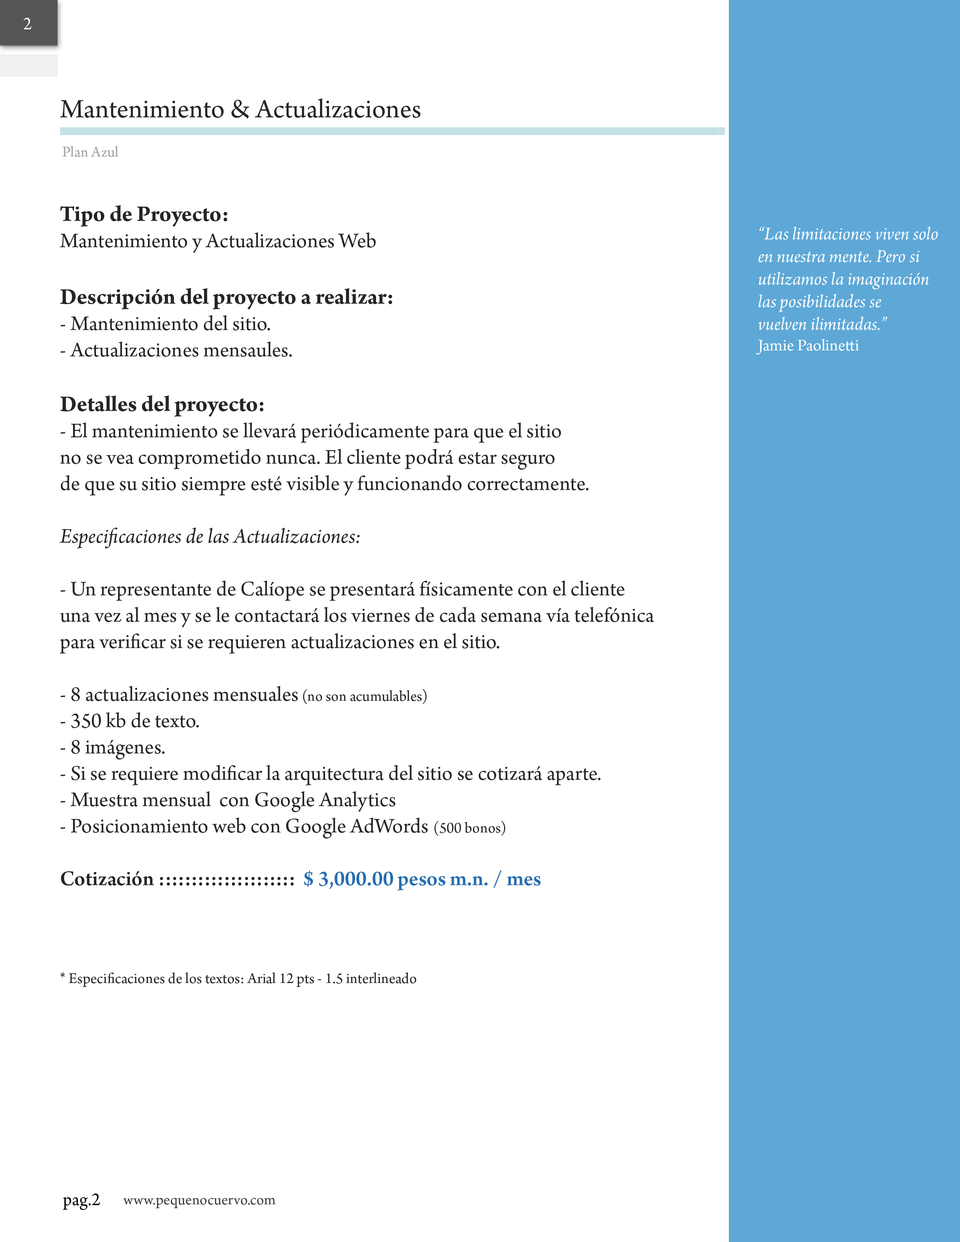
<style>
.page{position:relative;width:960px;height:1242px;background:#ffffff}
.page>*{position:absolute;margin:0}
.t1{font:18.8px "ArnoPro-Regular";color:#fcfcfc}
.t2{font:28.2px "ArnoPro-Regular";color:#252525}
.t3{font:15.7px "ArnoPro-Regular";color:#a0a0a0}
.t4{font:22px "ArnoPro-Regular";color:#252525}
.t5{font:23.5px "ArnoPro-Regular";color:#252525}
.t6{font:23.5px "ArnoPro-Bold";color:#252525}
.t7{font:22px "ArnoPro-Italic";color:#252525}
.t8{font:15.7px "ArnoPro-Regular";color:#252525}
.t9{font:22px "ArnoPro-Smbd";color:#252525}
.t10{font:22px "ArnoPro-Smbd";color:#256db0}
.t11{font:18.8px "ArnoPro-Italic";color:#ffffff}
.t12{font:17.3px "ArnoPro-Regular";color:#ffffff}
.t13{font:18.8px "ArnoPro-Regular";color:#010101}
.t14{font:15.7px "ArnoPro-Regular";color:#3c3c3c}
</style>
<div class="page">
<p class="t1" style="left:23px;top:18px;width:9px;height:11px">2</p>
<p class="t2" style="left:60px;top:98px;width:360px;height:21px">Mantenimiento &amp; Actualizaciones</p>
<p class="t3" style="left:62px;top:146px;width:56px;height:11px">Plan Azul</p>
<p class="t4" style="left:59px;top:205px;width:595px;height:782px"><span class="t5"><br></span><span class="t6">Tipo de Proyecto: <br></span>Mantenimiento y Actualizaciones Web<br><br><span class="t6">Descripción del proyecto a realizar:<br></span>- Mantenimiento del sitio. <br>- Actualizaciones mensaules.<br><br><span class="t6">Detalles del proyecto:<br></span>- El mantenimiento se llevará periódicamente para que el sitio<br>no se vea comprometido nunca. El cliente podrá estar seguro<br>de que su sitio siempre esté visible y funcionando correctamente.<br><br><span class="t7">Especificaciones de las Actualizaciones:<br><br></span>- Un representante de Calíope se presentará físicamente con el cliente<br>una vez al mes y se le contactará los viernes de cada semana vía telefónica<br>para verificar si se requieren actualizaciones en el sitio.<br><br>- 8 actualizaciones mensuales<span class="t8"> (no son acumulables)<br></span>- 350 kb de texto.<br>- 8 imágenes.<br>- Si se requiere modificar la arquitectura del sitio se cotizará aparte. <br>- Muestra mensual  con Google Analytics<br>- Posicionamiento web con Google AdWords <span class="t8">(500 bonos)<br><br></span><span class="t9">Cotización :::::::::::::::::::::  </span><span class="t10">$ 3,000.00 pesos m.n. / mes<br><br><br><br></span><span class="t8">* Especificaciones de los textos: Arial 12 pts - 1.5 interlineado</span></p>
<p class="t11" style="left:756px;top:226px;width:182px;height:129px">“Las limitaciones viven solo<br>en nuestra mente. Pero si <br>utilizamos la imaginación<br>las posibilidades se<br>vuelven ilimitadas.”<br><span class="t12">Jamie Paolinetti</span></p>
<p class="t13" style="left:63px;top:1194px;width:37px;height:16px">pag.2</p>
<p class="t14" style="left:123px;top:1198px;width:153px;height:11px">www.pequenocuervo.com</p>
</div>
